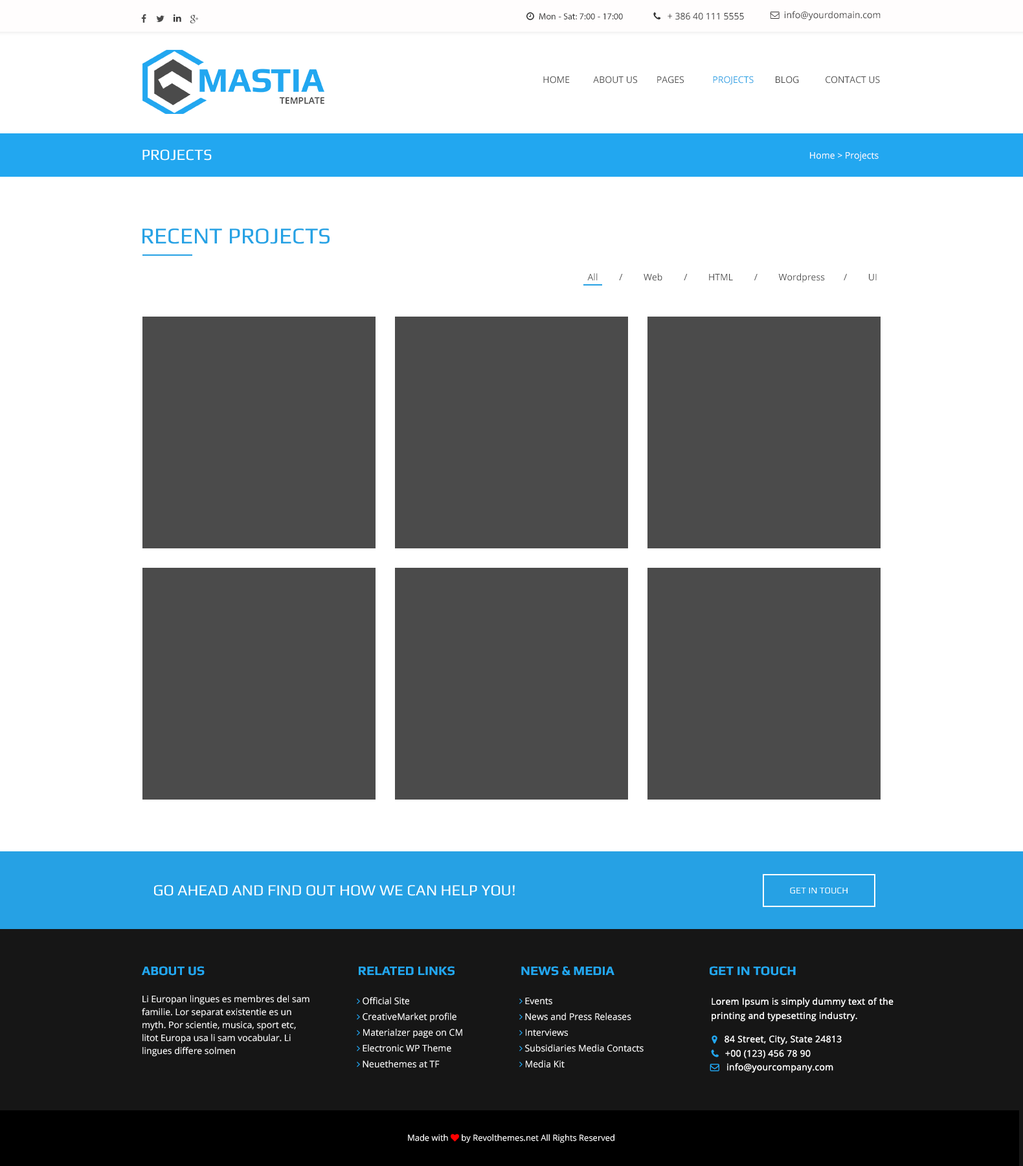
<style>
.page{position:relative;width:1023px;height:1166px;background:#ffffff}
.page>*{position:absolute;margin:0}
.t1{font:9.1px "OpenSans";color:#4b4b4b;text-transform:uppercase}
.t2{font:9.1px "OpenSans";color:#26a1e4;text-transform:uppercase}
.t3{font:15.5px "Play";color:#ffffff;text-transform:uppercase}
.t4{font:9.1px "OpenSans";color:#ffffff}
.t5{font:22.7px "Play";color:#26a1e4;text-transform:uppercase}
.t6{font:9.1px "OpenSans";color:#4b4b4b}
.t7{font:15.5px "Play";color:#ffffff}
.t8{font:9.1px "Play";color:#ffffff}
.t9{font:12.9px "Play-Bold";color:#22a7f0;text-transform:uppercase}
.t10{font:9.1px/12.9px "OpenSans";color:#ffffff}
.t11{font:9.1px/14.2px "OpenSans";letter-spacing:0.02em;color:#ffffff}
.t12{font:9.1px "OpenSans";letter-spacing:0.02em;color:#ffffff}
</style>
<div class="page">
<p class="t1" style="left:543px;top:76px;width:337px;height:9px">HOME          ABOUT US        Pages            <span class="t2">PROJECTS         </span>BLOG           Contact us</p>
<p class="t3" style="left:142px;top:150px;width:70px;height:11px">PROJECTS</p>
<p class="t4" style="left:810px;top:151px;width:68px;height:10px">Home &gt; Projects</p>
<p class="t5" style="left:142px;top:229px;width:187px;height:15px">Recent PROJECTS</p>
<p class="t6" style="left:587px;top:273px;width:289px;height:10px">All         /         Web         /         HTML         /         Wordpress        /         UI</p>
<p class="t7" style="left:154px;top:885px;width:361px;height:11px">GO AHEAD AND FIND OUT HOW WE CAN HELP YOU!</p>
<p class="t8" style="left:790px;top:887px;width:57px;height:7px">GET IN TOUCH</p>
<p class="t9" style="left:142px;top:966px;width:63px;height:10px">About Us</p>
<p class="t9" style="left:359px;top:966px;width:95px;height:10px">Related Links</p>
<p class="t9" style="left:521px;top:966px;width:93px;height:10px">News &amp; Media</p>
<p class="t9" style="left:709px;top:966px;width:87px;height:10px">Get IN TOUCH</p>
<p class="t10" style="left:142px;top:995px;width:167px;height:61px">Li Europan lingues es membres del sam familie. Lor separat existentie es un myth. Por scientie, musica, sport etc, litot Europa usa li sam vocabular. Li lingues differe solmen</p>
<p class="t11" style="left:711px;top:998px;width:182px;height:24px">Lorem Ipsum is simply dummy text of the <br>printing and typesetting industry.</p>
<p class="t12" style="left:724px;top:1035px;width:118px;height:10px">84 Street, City, State 24813</p>
<p class="t12" style="left:725px;top:1049px;width:85px;height:9px">+00 (123) 456 78 90</p>
<p class="t12" style="left:727px;top:1063px;width:106px;height:10px">info@yourcompany.com</p>
</div>
